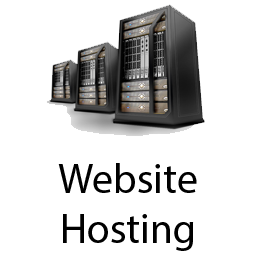
<style>
.page{position:relative;width:256px;height:256px;background:#ffffff}
.page>*{position:absolute;margin:0}
.t1{font:41.7px "MyriadPro-Regular";color:#000000}
</style>
<div class="page">
<p class="t1" style="left:58px;top:163px;width:139px;height:88px;text-align:center">Website<br>Hosting</p>
</div>
